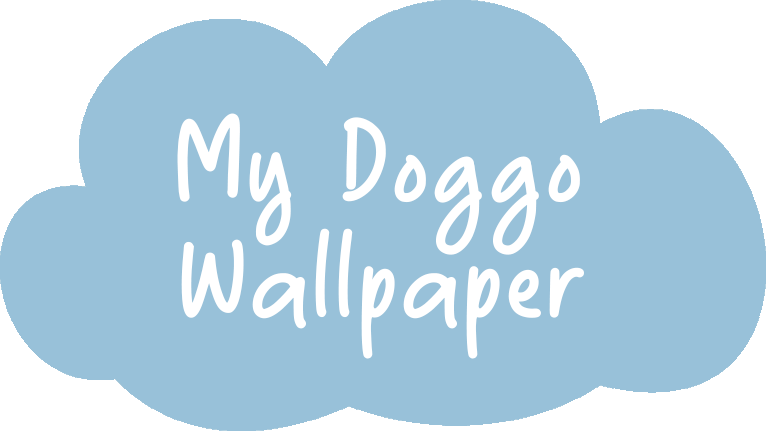
<style>
.page{position:relative;width:766px;height:431px;background:#98c1d9}
.page>*{position:absolute;margin:0}
.t1{font:158.3px "Really_Free";color:#ffffff}
</style>
<div class="page">
<p class="t1" style="left:177px;top:113px;width:115px;height:133px">My</p>
<p class="t1" style="left:342px;top:117px;width:238px;height:138px">Doggo</p>
<p class="t1" style="left:181px;top:228px;width:403px;height:131px">Wallpaper</p>
</div>
